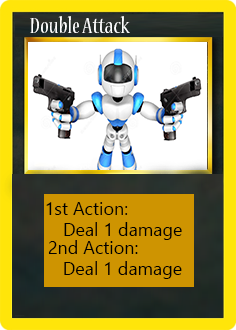
<style>
.page{position:relative;width:236px;height:330px}
.page>*{position:absolute;margin:0}
.t1{font:24px "NuevaStd-Cond";color:#ffffff}
.t2{font:18px "LeelawadeeUI";color:#000000}
</style>
<div class="page">
<p class="t1" style="left:30px;top:16px;width:100px;height:17px">Double Attack</p>
<p class="t2" style="left:46px;top:202px;width:82px;height:13px">1st Action:</p>
<p class="t2" style="left:64px;top:222px;width:118px;height:18px">Deal 1 damage</p>
<p class="t2" style="left:48px;top:240px;width:134px;height:39px">2nd Action:<br>   Deal 1 damage</p>
</div>
